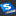
<style>
.page{position:relative;width:16px;height:16px;background:#333333}
.page>*{position:absolute;margin:0}
.t1{font:11.5px "Delicious-Heavy";letter-spacing:-0.025em;color:#ffffff;scale:1.53 1}
</style>
<div class="page">
<p class="t1" style="left:3px;top:4px;width:9px;height:6px;rotate:-11deg">s</p>
</div>
